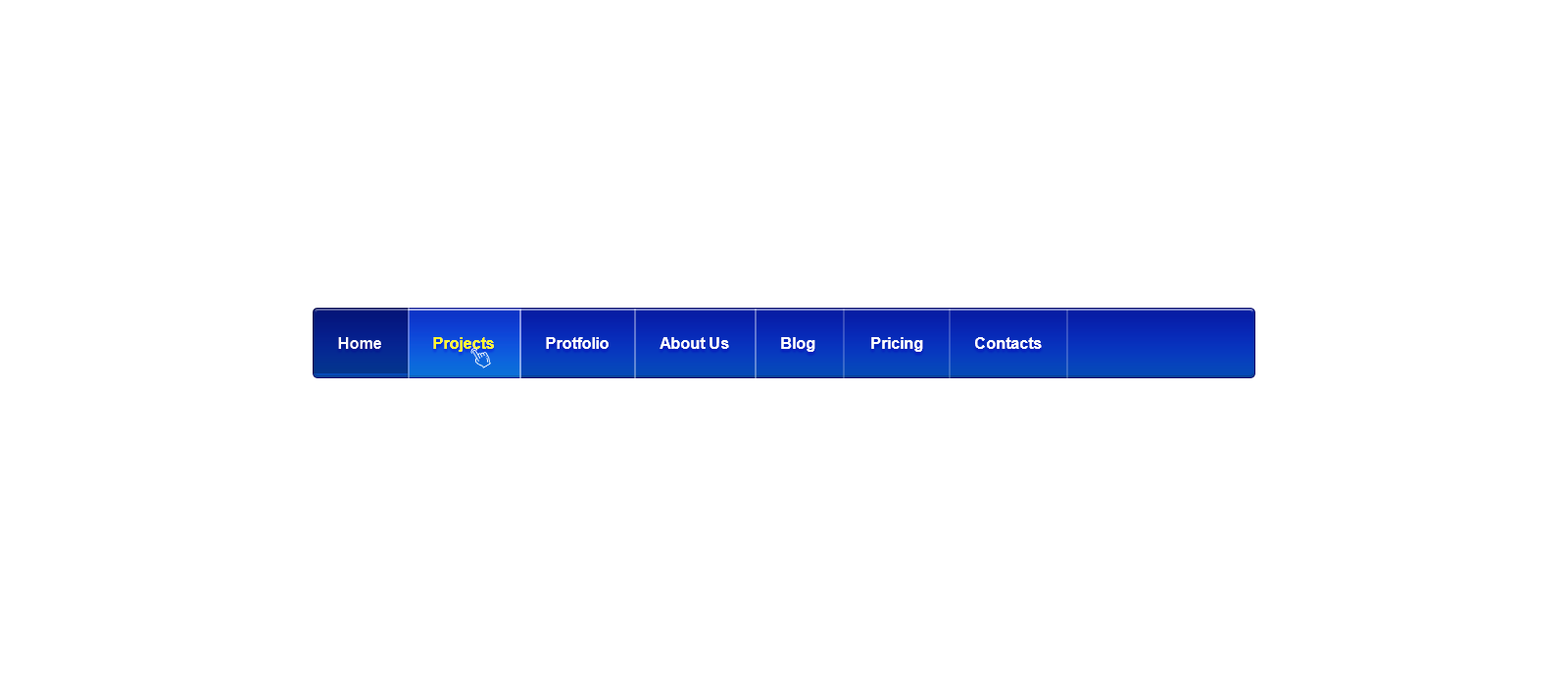
<style>
.page{position:relative;width:1568px;height:686px;background:#ffffff}
.page>*{position:absolute;margin:0}
.t1{font:15.7px "Arial-BoldMT";color:#fefeff}
.t2{font:15.7px "Arial-BoldMT";color:#feeb18}
</style>
<div class="page">
<p class="t1" style="left:338px;top:337px;width:704px;height:15px">Home             <span class="t2">Projects</span>             Protfolio             About Us             Blog              Pricing             Contacts</p>
</div>
